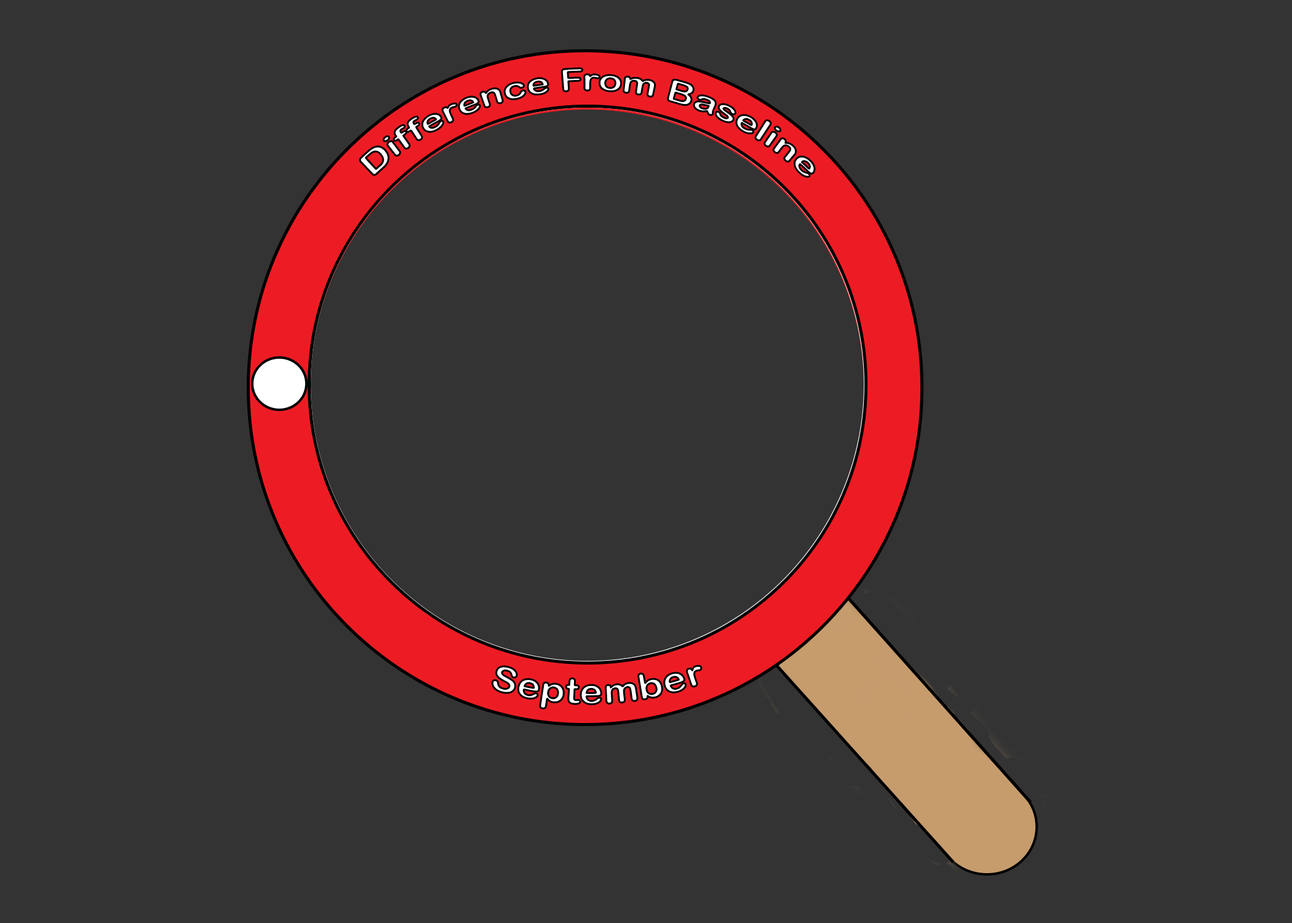
<style>
.page{position:relative;width:1292px;height:923px;background:#333333}
.page>*{position:absolute;margin:0}
.t1{font:30.8px "ArialRoundedMTBold"}
.t2{font:35.9px "ArialRoundedMTBold"}
</style>
<div class="page">
<p class="t1" style="left:360px;top:68px;width:455px;height:109px;text-align:center">Difference From Baseline</p>
<p class="t2" style="left:492px;top:666px;width:209px;height:43px;rotate:-2deg">September</p>
</div>
